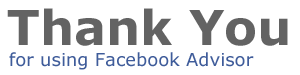
<style>
.page{position:relative;width:300px;height:75px;background:#ffffff}
.page>*{position:absolute;margin:0}
.t1{font:48px "Verdana-Bold";color:#636363}
.t2{font:18px "Verdana";color:#3f5c9a}
</style>
<div class="page">
<p class="t1" style="left:7px;top:8px;width:281px;height:38px">Thank You</p>
<p class="t2" style="left:9px;top:52px;width:245px;height:18px">for using Facebook Advisor</p>
</div>
